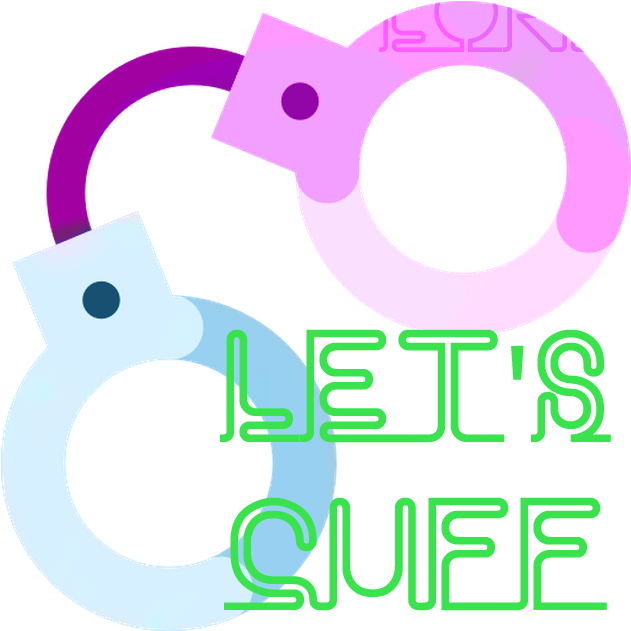
<style>
.page{position:relative;width:631px;height:631px;background:#ffffff}
.page>*{position:absolute;margin:0}
.t1{font:140.1px "Neon";color:#3ae24d}
.t2{font:140.1px "MyriadPro-Regular";color:#3ae24d}
</style>
<div class="page">
<p class="t1" style="left:220px;top:329px;width:391px;height:282px;text-align:center">LeT<span class="t2">'</span>S<br>cuff</p>
</div>
